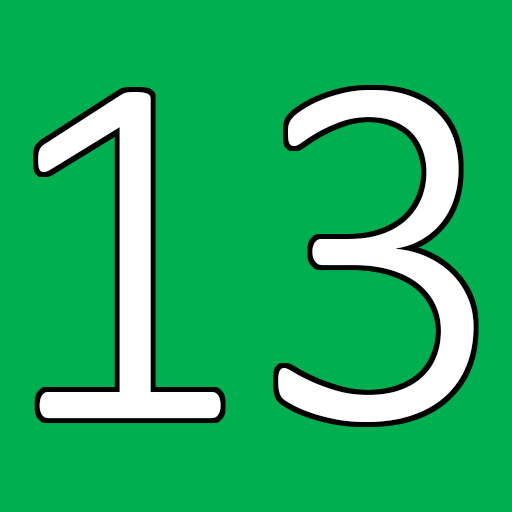
<style>
.page{position:relative;width:512px;height:512px;background:#00af50}
.page>*{position:absolute;margin:0}
.t1{font:511.5px "Calibri-Light";color:#ffffff}
</style>
<div class="page">
<p class="t1" style="left:38px;top:90px;width:436px;height:332px">13</p>
</div>
